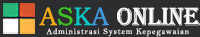
<style>
.page{position:relative;width:200px;height:37px;background:#2c2d2e}
.page>*{position:absolute;margin:0}
.t1{font:25.7px "Algerian";letter-spacing:-0.01em;color:#fdfdfd}
.t2{font:25.7px "BookmanOldStyle";letter-spacing:-0.01em;color:#f5ae15}
.t3{font:25.7px "BookmanOldStyle";letter-spacing:-0.01em;color:#40c025}
.t4{font:25.7px "BookmanOldStyle";letter-spacing:-0.01em;color:#08c4c2}
.t5{font:25.7px "BookmanOldStyle";letter-spacing:-0.01em;color:#4198db}
.t6{font:8.3px "BellMT";letter-spacing:0.1em;color:#f2ebeb}
</style>
<div class="page">
<p class="t1" style="left:39px;top:7px;width:161px;height:19px"><span class="t2">A</span><span class="t3">S</span><span class="t4">K</span><span class="t5">A </span>ONLINE</p>
<p class="t6" style="left:46px;top:28px;width:143px;height:9px">Administrasi System Kepegawaian</p>
</div>
